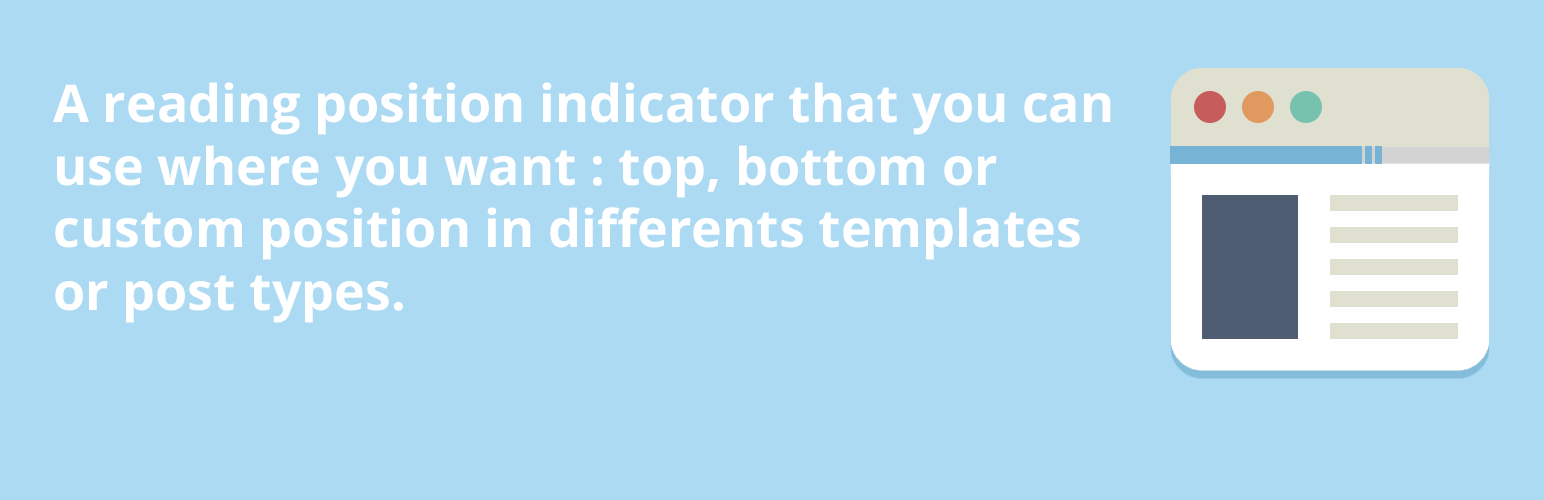
<style>
.page{position:relative;width:1544px;height:500px;background:#acdaf3}
.page>*{position:absolute;margin:0}
.t1{font:52px "OpenSans-Bold";color:#ffffff}
</style>
<div class="page">
<p class="t1" style="left:53px;top:82px;width:1058px;height:241px">A reading position indicator that you can use where you want : top, bottom or custom position in differents templates or post types.</p>
</div>
